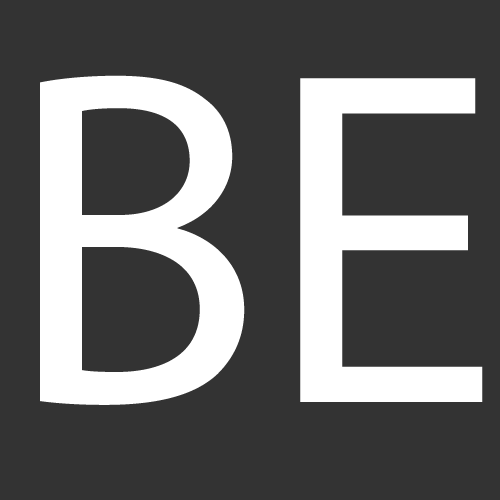
<style>
.page{position:relative;width:500px;height:500px;background:#333333}
.page>*{position:absolute;margin:0}
.t1{font:480.2px "MyriadPro-Regular";color:#ffffff}
</style>
<div class="page">
<p class="t1" style="left:40px;top:75px;width:443px;height:330px">BE</p>
</div>
